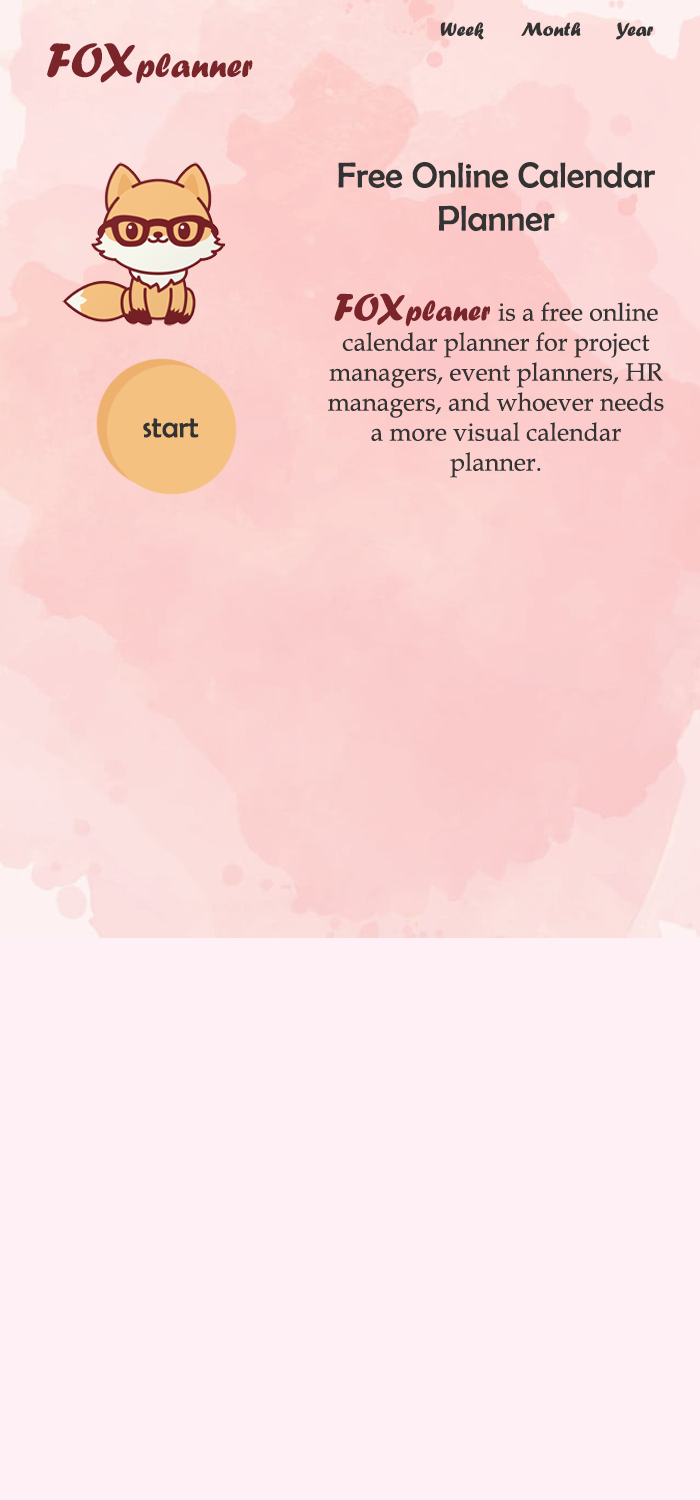
<style>
.page{position:relative;width:700px;height:1500px;background:#fff0f5}
.page>*{position:absolute;margin:0}
.t1{font:20px "ForteMT";color:#333333}
.t2{font:35px "ForteMT";color:#7a252a}
.t3{font:50px "ForteMT";color:#7a252a}
.t4{font:25px "BookAntiqua";color:#333333}
.t5{font:36px "BerlinSansFB-Reg";color:#333333}
.t6{font:40px "ForteMT";color:#7a252a}
.t7{font:30px "ForteMT";color:#7a252a}
.t8{font:30px "BerlinSansFB-Reg";color:#333333}
</style>
<div class="page">
<p class="t1" style="left:440px;top:22px;width:213px;height:18px">Week       Month       Year</p>
<p class="t2" style="left:47px;top:43px;width:206px;height:41px"><span class="t3">FOX</span>planner</p>
<p class="t4" style="left:328px;top:162px;width:336px;height:316px;text-align:center"><span class="t5">Free Online Calendar Planner<br><br></span><span class="t6">FOX</span><span class="t7">planer </span>is a free online calendar planner for project managers, event planners, HR managers, and whoever needs a more visual calendar planner.</p>
<p class="t8" style="left:143px;top:418px;width:56px;height:20px">start</p>
</div>
